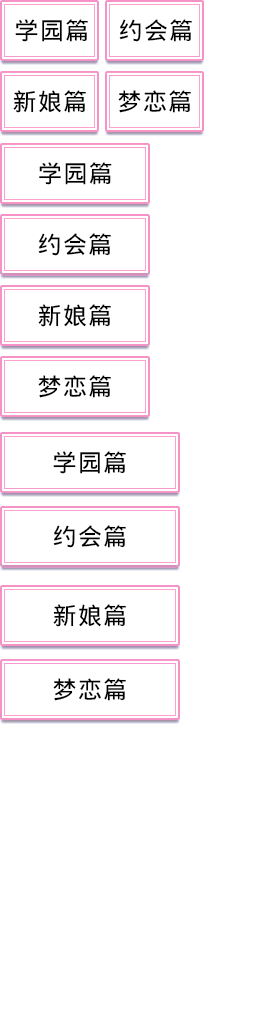
<style>
.page{position:relative;width:256px;height:1024px;background:#ffffff}
.page>*{position:absolute;margin:0}
.t1{font:24px "WenQuanYiMicroHeiMono";letter-spacing:0.05em;color:#000000}
</style>
<div class="page">
<p class="t1" style="left:15px;top:19px;width:73px;height:23px">学园篇</p>
<p class="t1" style="left:119px;top:19px;width:73px;height:23px">约会篇</p>
<p class="t1" style="left:13px;top:90px;width:73px;height:23px">新娘篇</p>
<p class="t1" style="left:118px;top:90px;width:73px;height:23px">梦恋篇</p>
<p class="t1" style="left:39px;top:162px;width:73px;height:23px">学园篇</p>
<p class="t1" style="left:38px;top:233px;width:73px;height:23px">约会篇</p>
<p class="t1" style="left:38px;top:304px;width:73px;height:23px">新娘篇</p>
<p class="t1" style="left:38px;top:375px;width:73px;height:23px">梦恋篇</p>
<p class="t1" style="left:53px;top:451px;width:73px;height:23px">学园篇</p>
<p class="t1" style="left:53px;top:525px;width:73px;height:23px">约会篇</p>
<p class="t1" style="left:53px;top:604px;width:73px;height:23px">新娘篇</p>
<p class="t1" style="left:53px;top:678px;width:73px;height:23px">梦恋篇</p>
</div>
